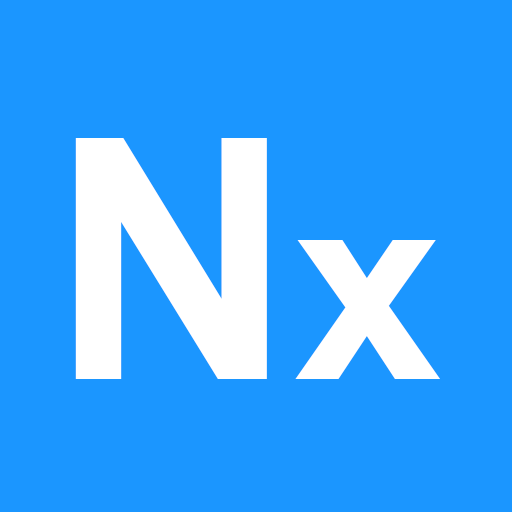
<style>
.page{position:relative;width:512px;height:512px;background:#1b96ff}
.page>*{position:absolute;margin:0}
.t1{font:336px "Arial-BoldMT";color:#ffffff}
.t2{font:267px "Arial-BoldMT";color:#ffffff}
</style>
<div class="page">
<p class="t1" style="left:75px;top:138px;width:365px;height:241px">N<span class="t2">x</span></p>
</div>
